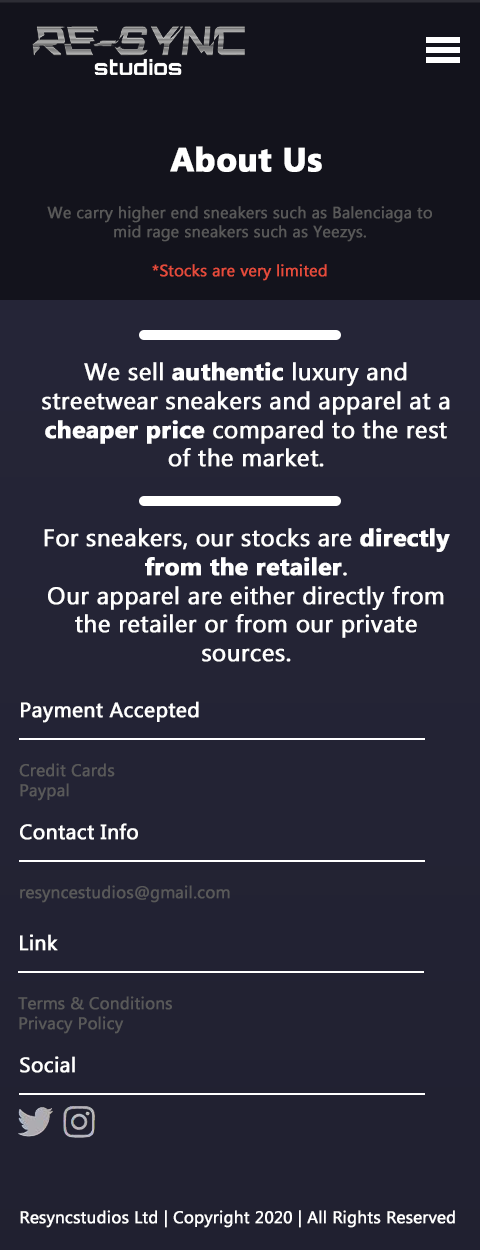
<style>
.page{position:relative;width:480px;height:1250px;background:#13131c}
.page>*{position:absolute;margin:0}
.t1{font:33.3px "MicrosoftTaiLe-Bold";color:#ffffff;font-weight:bold}
.t2{font:16px "MicrosoftTaiLe";color:#595959;font-weight:bold}
.t3{font:16px "MicrosoftTaiLe";color:#e64c3c;font-weight:bold}
.t4{font:24px "MicrosoftTaiLe";color:#ffffff;font-weight:bold}
.t5{font:24px "MicrosoftTaiLe-Bold";color:#ffffff;font-weight:bold}
.t6{font:20.8px "MicrosoftTaiLe";color:#ffffff;font-weight:bold}
.t7{font:16.7px "MicrosoftTaiLe";color:#595959;font-weight:bold}
.t8{font:16.7px "MicrosoftTaiLe";color:#ffffff;font-weight:bold}
</style>
<div class="page">
<p class="t1" style="left:170px;top:146px;width:152px;height:26px">About Us</p>
<p class="t2" style="left:47px;top:206px;width:385px;height:75px;text-align:center">We carry higher end sneakers such as Balenciaga to mid rage sneakers such as Yeezys.<br><br><span class="t3">*Stocks are very limited</span></p>
<p class="t4" style="left:42px;top:362px;width:408px;height:105px;text-align:center">We sell <span class="t5">authentic</span> luxury and streetwear sneakers and apparel at a <span class="t5">cheaper price </span>compared to the rest of the market.</p>
<p class="t4" style="left:44px;top:528px;width:406px;height:134px;text-align:center">For sneakers, our stocks are <span class="t5">directly from the retailer</span>.<br>Our apparel are either directly from the retailer or from our private sources.</p>
<p class="t6" style="left:21px;top:701px;width:178px;height:22px">Payment Accepted</p>
<p class="t7" style="left:19px;top:763px;width:96px;height:38px">Credit Cards<br>Paypal</p>
<p class="t6" style="left:20px;top:823px;width:118px;height:17px">Contact Info</p>
<p class="t7" style="left:20px;top:885px;width:210px;height:18px">resyncestudios@gmail.com</p>
<p class="t6" style="left:20px;top:934px;width:38px;height:17px">Link</p>
<p class="t7" style="left:18px;top:996px;width:154px;height:38px">Terms &amp; Conditions<br>Privacy Policy</p>
<p class="t6" style="left:20px;top:1056px;width:55px;height:17px">Social</p>
<p class="t8" style="left:20px;top:1210px;width:435px;height:18px">Resyncstudios Ltd | Copyright 2020 | All Rights Reserved</p>
</div>
